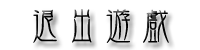
<style>
.page{position:relative;width:200px;height:50px;background:#ffffff}
.page>*{position:absolute;margin:0}
.t1{font:36px "DFJinWen-W3-WIN-BF";color:#000000;font-weight:bold}
</style>
<div class="page">
<p class="t1" style="left:33px;top:9px;width:136px;height:34px">退出遊戲</p>
</div>
